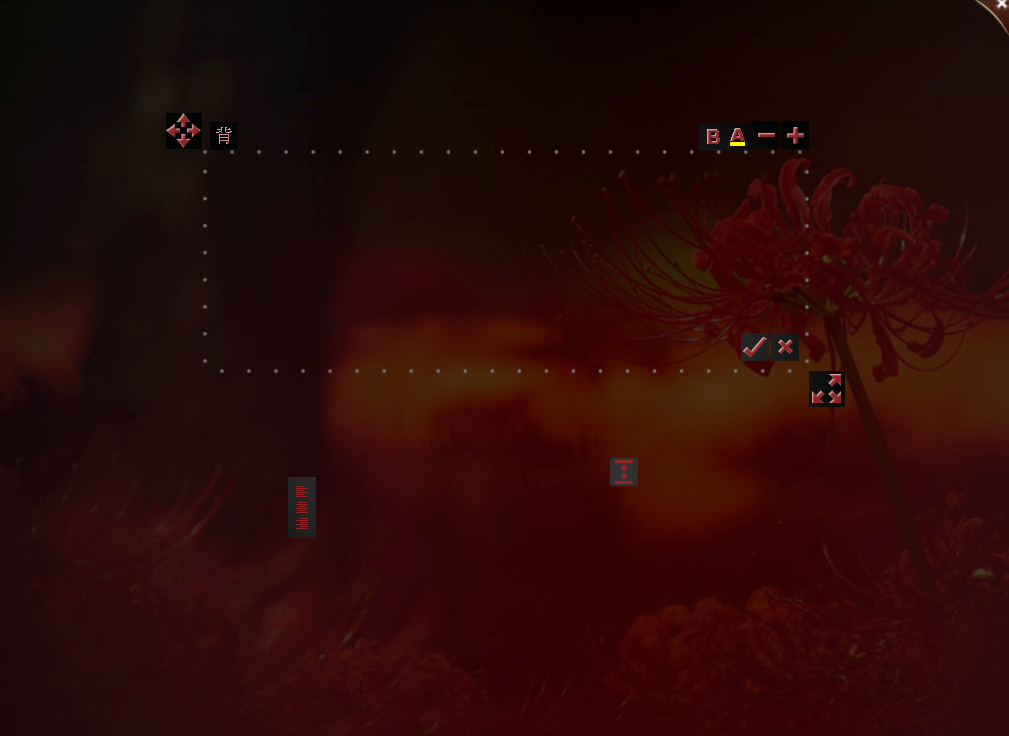
<style>
.page{position:relative;width:1009px;height:736px}
.page>*{position:absolute;margin:0}
.t1{font:20px "AdobeHeitiStd-Regular"}
.t2{font:20px "Arial-Black"}
.t3{font:18px "Arial-Black"}
</style>
<div class="page">
<p class="t1" style="left:216px;top:127px;width:16px;height:17px">背</p>
<p class="t1" style="left:216px;top:127px;width:16px;height:17px">背</p>
<p class="t2" style="left:707px;top:129px;width:13px;height:15px">B</p>
<p class="t3" style="left:730px;top:128px;width:15px;height:13px">A</p>
</div>
